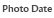
<style>
.page{position:relative;width:54px;height:18px;background:#ffffff}
.page>*{position:absolute;margin:0}
.t1{font:10px "AmiraParadiso";color:#474747}
</style>
<div class="page">
<p class="t1" style="left:2px;top:5px;width:50px;height:7px">Photo Date</p>
</div>
